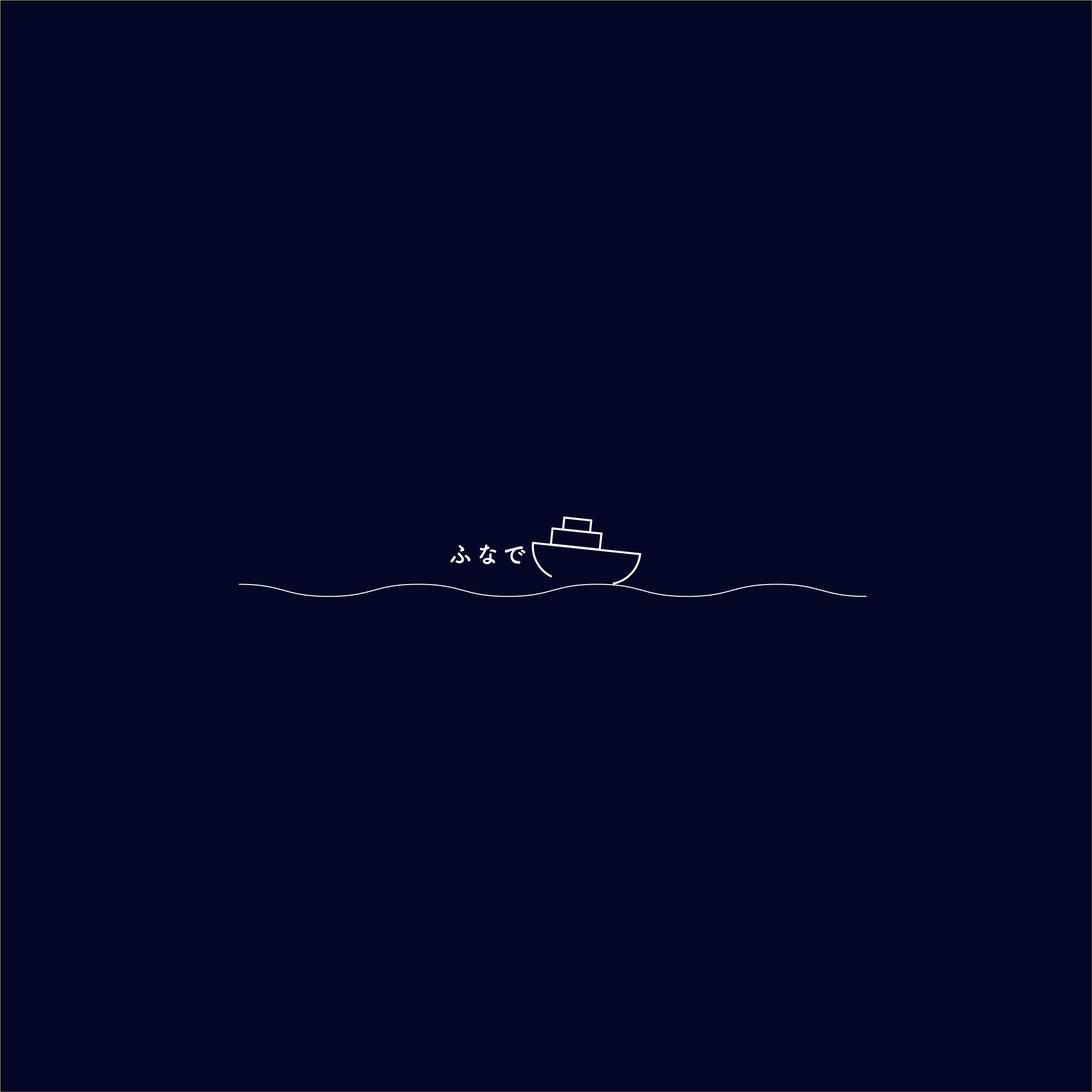
<style>
.page{position:relative;width:1092px;height:1092px;background:#040826}
.page>*{position:absolute;margin:0}
.t1{font:24.3px "TsukuARdGothicStd-B";letter-spacing:0.1em;color:#ffffff}
</style>
<div class="page">
<p class="t1" style="left:450px;top:544px;width:75px;height:20px">ふなで</p>
</div>
